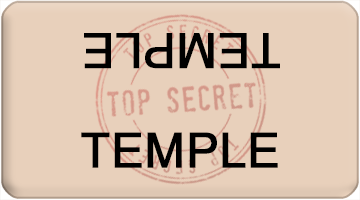
<style>
.page{position:relative;width:360px;height:200px;background:#e8d0bb}
.page>*{position:absolute;margin:0}
.t1{font:48px "ArialMT";color:#000000;font-weight:bold}
</style>
<div class="page">
<p class="t1" style="left:84px;top:33px;width:196px;height:36px;rotate:180deg">TEMPLE</p>
<p class="t1" style="left:81px;top:132px;width:197px;height:36px">TEMPLE</p>
</div>
